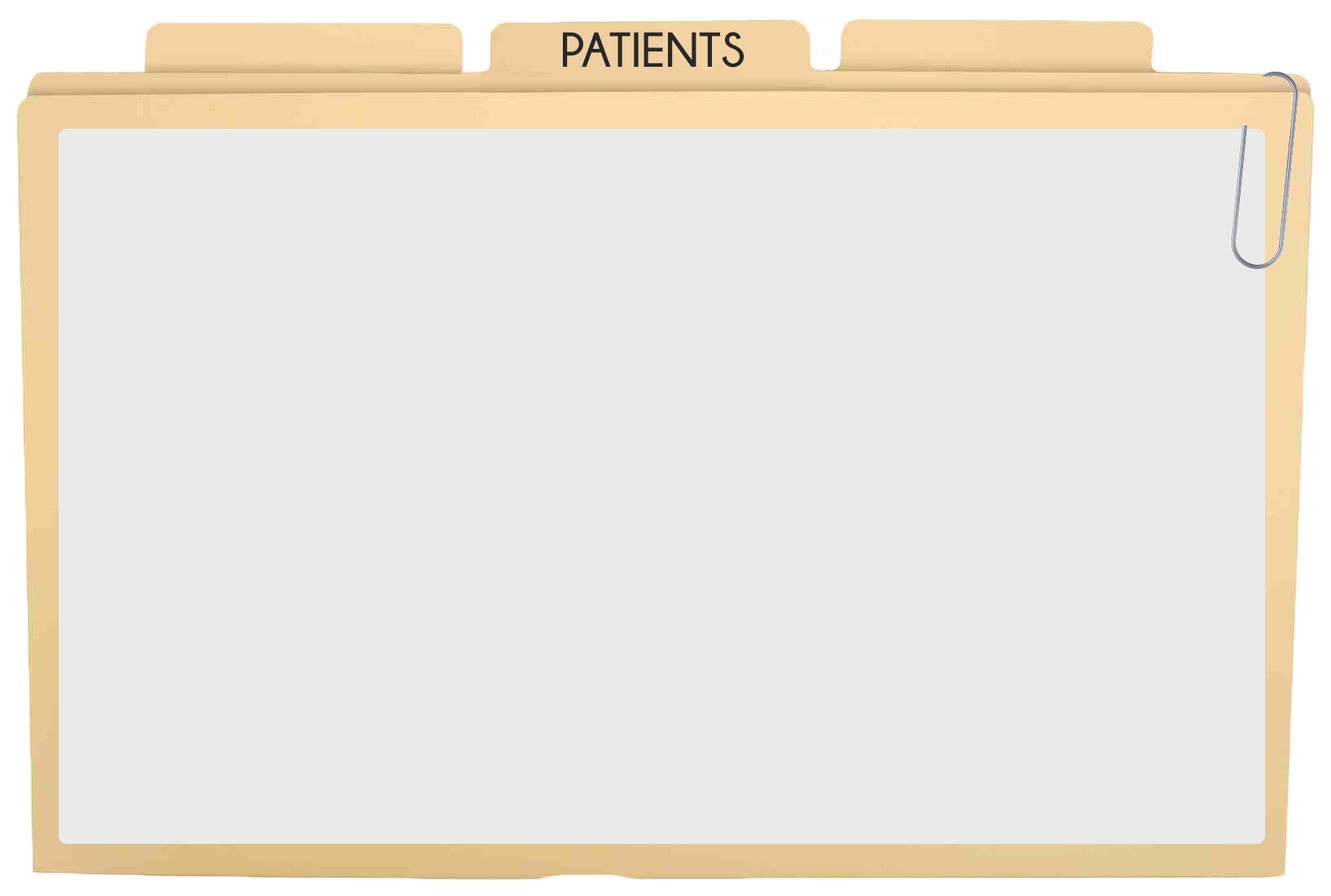
<style>
.page{position:relative;width:1331px;height:896px;background:#eaeaea}
.page>*{position:absolute;margin:0}
.t1{font:48.9px "Champagne&Limousines-Bold";color:#282828}
</style>
<div class="page">
<p class="t1" style="left:563px;top:32px;width:181px;height:36px">PATIENTS</p>
</div>
